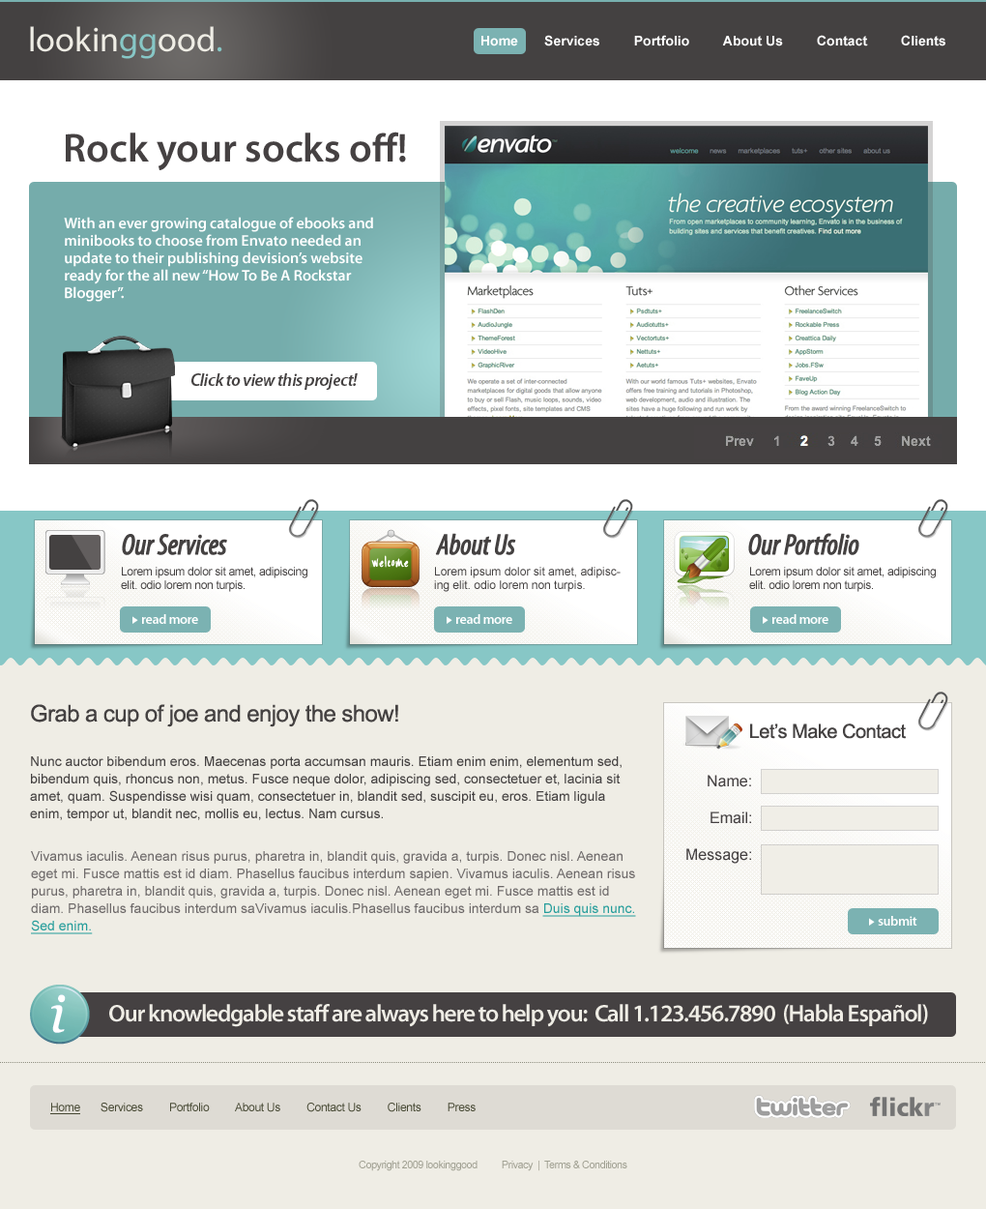
<style>
.page{position:relative;width:986px;height:1209px;background:#efede5}
.page>*{position:absolute;margin:0}
.t1{font:34.8px "MyriadPro-Regular";color:#efede5}
.t2{font:34.8px "MyriadPro-Regular";color:#87c7c6}
.t3{font:13.5px "Arial-BoldMT";color:#ffffff}
.t4{font:40.6px "MyriadPro-Semibold";color:#454142}
.t5{font:15.5px/17.4px "MyriadPro-Semibold";color:#ffffff}
.t6{font:17.4px "MyriadPro-SemiboldIt";letter-spacing:-0.025em;color:#444141}
.t7{font:29px "MyriadPro-CondIt";letter-spacing:-0.025em;color:#444141;font-weight:bold}
.t8{font:11.6px "ArialMT";letter-spacing:-0.025em;color:#444141}
.t9{font:11.6px "ArialMT";color:#444141}
.t10{font:13.5px "MyriadPro-Semibold";letter-spacing:-0.025em;color:#ffffff}
.t11{font:23.2px "ArialMT";letter-spacing:-0.025em;color:#444141}
.t12{font:19.3px "ArialMT";letter-spacing:-0.025em;color:#444141}
.t13{font:13.5px/17.4px "ArialMT";color:#444141}
.t14{font:15.5px "ArialMT";color:#454142}
.t15{font:13.5px/17.4px "ArialMT";color:#6e6a6a}
.t16{font:13.5px/17.4px "ArialMT";color:#269d9b;text-decoration:underline}
.t17{font:24.2px "MyriadPro-Semibold";letter-spacing:-0.05em;color:#efede5}
.t18{font:11.6px "ArialMT";letter-spacing:-0.025em;color:#464833}
.t19{font:11.6px "ArialMT";letter-spacing:-0.025em;color:#464833;text-decoration:underline}
.t20{font:10.6px "ArialMT";letter-spacing:-0.05em;color:#a1a193}
</style>
<div class="page">
<p class="t1" style="left:30px;top:26px;width:192px;height:33px">lookin<span class="t2">gg</span>ood<span class="t2">.</span></p>
<p class="t3" style="left:482px;top:35px;width:464px;height:11px">Home       Services         Portfolio         About Us         Contact         Clients</p>
<p class="t4" style="left:66px;top:132px;width:340px;height:38px">Rock your socks off!</p>
<p class="t5" style="left:64px;top:217px;width:309px;height:85px">With an ever growing catalogue of ebooks and minibooks to choose from Envato needed an update to their publishing devision’s website ready for the all new “How To Be A Rockstar Blogger”.</p>
<p class="t6" style="left:191px;top:373px;width:167px;height:17px">Click to view this project!</p>
<p class="t7" style="left:122px;top:534px;width:105px;height:21px">Our Services</p>
<p class="t7" style="left:435px;top:533px;width:81px;height:22px">About Us</p>
<p class="t7" style="left:749px;top:533px;width:111px;height:22px">Our Portfolio</p>
<p class="t8" style="left:121px;top:567px;width:187px;height:25px">Lorem ipsum dolor sit amet, adipiscing elit. odio lorem non turpis.</p>
<p class="t9" style="left:434px;top:567px;width:187px;height:25px">Lorem ipsum dolor sit amet, adipiscing elit. odio lorem non turpis.</p>
<p class="t8" style="left:749px;top:567px;width:187px;height:25px">Lorem ipsum dolor sit amet, adipiscing elit. odio lorem non turpis.</p>
<p class="t10" style="left:142px;top:614px;width:56px;height:10px">read more</p>
<p class="t10" style="left:456px;top:614px;width:57px;height:10px">read more</p>
<p class="t10" style="left:773px;top:614px;width:56px;height:10px">read more</p>
<p class="t11" style="left:31px;top:704px;width:367px;height:23px">Grab a cup of joe and enjoy the show!</p>
<p class="t12" style="left:750px;top:723px;width:156px;height:16px">Let’s Make Contact</p>
<p class="t13" style="left:30px;top:756px;width:592px;height:65px">Nunc auctor bibendum eros. Maecenas porta accumsan mauris. Etiam enim enim, elementum sed, bibendum quis, rhoncus non, metus. Fusce neque dolor, adipiscing sed, consectetuer et, lacinia sit amet, quam. Suspendisse wisi quam, consectetuer in, blandit sed, suscipit eu, eros. Etiam ligula enim, tempor ut, blandit nec, mollis eu, lectus. Nam cursus.</p>
<p class="t14" style="left:708px;top:775px;width:43px;height:12px">Name:</p>
<p class="t14" style="left:711px;top:811px;width:40px;height:13px">Email:</p>
<p class="t15" style="left:31px;top:851px;width:605px;height:83px">Vivamus iaculis. Aenean risus purus, pharetra in, blandit quis, gravida a, turpis. Donec nisl. Aenean eget mi. Fusce mattis est id diam. Phasellus faucibus interdum sapien. Vivamus iaculis. Aenean risus purus, pharetra in, blandit quis, gravida a, turpis. Donec nisl. Aenean eget mi. Fusce mattis est id diam. Phasellus faucibus interdum saVivamus iaculis.Phasellus faucibus interdum sa <span class="t16">Duis quis nunc. Sed enim.</span></p>
<p class="t14" style="left:687px;top:848px;width:64px;height:16px">Message:</p>
<p class="t10" style="left:878px;top:916px;width:40px;height:9px">submit</p>
<p class="t17" style="left:109px;top:1004px;width:819px;height:23px">Our knowledgable staff are always here to help you:  Call 1.123.456.7890  (Habla Español)</p>
<p class="t18" style="left:50px;top:1102px;width:426px;height:12px"><span class="t19">Home</span>       Services         Portfolio         About Us         Contact Us         Clients         Press</p>
<p class="t20" style="left:359px;top:1160px;width:269px;height:11px">Copyright 2009 lookinggood          Privacy  |  Terms &amp; Conditions</p>
</div>
